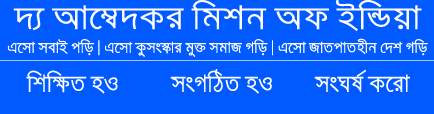
<style>
.page{position:relative;width:434px;height:114px;background:#005aff}
.page>*{position:absolute;margin:0}
.t1{font:27.2px "SiyamRupaliANSI";color:#ffffff;scale:1.17 1}
.t2{font:13px "SiyamRupaliANSI";color:#ffffff}
.t3{font:20px "SiyamRupaliANSI";color:#ffffff}
</style>
<div class="page">
<p class="t1" style="left:13px;top:0px;width:409px;height:31px">`¨ Av‡¤^`Ki wgkb Ad BwÛqv</p>
<p class="t2" style="left:7px;top:38px;width:421px;height:19px">G‡mv mevB cwo | G‡mv Kzms¯‹vi gy³ mgvR Mwo | G‡mv RvZcvZnxb †`k Mwo</p>
<p class="t3" style="left:26px;top:69px;width:384px;height:25px">wkw¶Z nI  msMwVZ nI  msNl© K‡iv</p>
</div>
